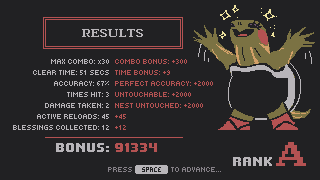
<style>
.page{position:relative;width:320px;height:180px;background:#212123}
.page>*{position:absolute;margin:0}
.t1{font:11px "NotJamOldStyle11";color:#b8b5b9}
.t2{font:8px/11px "Tiny5-Regular";color:#b8b5b9}
.t3{font:8px/11px "Tiny5-Regular";color:#b45252}
.t4{font:12px "NotJamUI12";color:#b8b5b9}
.t5{font:12px "NotJamUI12";color:#b45252}
.t6{font:33px "NotJamOldStyle11";color:#b45252}
.t7{font:8px "Tiny5-Regular";color:#868188}
</style>
<div class="page">
<p class="t1" style="left:82px;top:29px;width:61px;height:8px">RESULTS</p>
<p class="t2" style="left:13px;top:59px;width:96px;height:71px;text-align:right">MAX COMBO: x30<br>CLEAR TIME: 51 SECS<br>ACCURACY: 67%<br>TIMES HIT: 3<br>DAMAGE TAKEN: 2<br>ACTIVE RELOADS: 45<br>BLESSINGS COLLECTED: 12</p>
<p class="t3" style="left:115px;top:59px;width:98px;height:71px">COMBO BONUS: +300<br>TIME BONUS: +9<br>PERFECT ACCURACY: +2000<br>UNTOUCHABLE: +2000<br>NEST UNTOUCHED: +2000<br>+45<br>+12</p>
<p class="t4" style="left:56px;top:143px;width:53px;height:9px">BONUS:</p>
<p class="t5" style="left:115px;top:143px;width:42px;height:9px">91334</p>
<p class="t6" style="left:276px;top:142px;width:30px;height:24px">A</p>
<p class="t4" style="left:233px;top:157px;width:39px;height:9px">RANK</p>
<p class="t7" style="left:108px;top:167px;width:24px;height:5px">PRESS</p>
<p class="t7" style="left:171px;top:167px;width:50px;height:5px">TO ADVANCE...</p>
</div>
